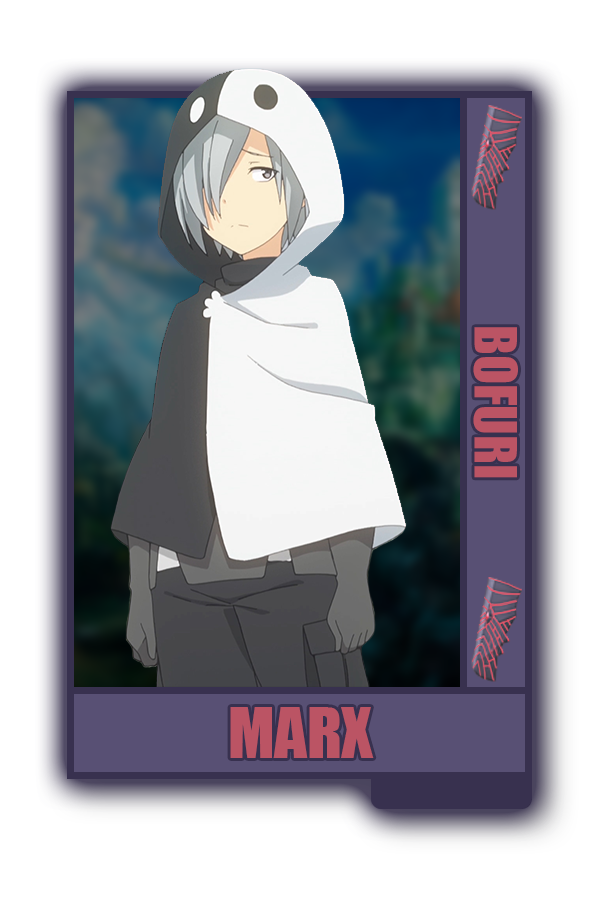
<style>
.page{position:relative;width:600px;height:900px;background:#ffffff}
.page>*{position:absolute;margin:0}
.t1{font:53.6px "Impact";color:#bb5464}
.t2{font:64.6px "Impact";color:#bb5464}
</style>
<div class="page">
<p class="t1" style="left:473px;top:327px;width:45px;height:151px;rotate:90deg">BOFURI</p>
<p class="t2" style="left:230px;top:707px;width:144px;height:51px">MARX</p>
</div>
